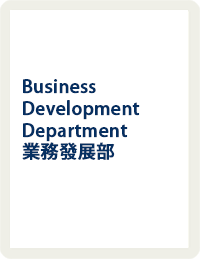
<style>
.page{position:relative;width:200px;height:259px;background:#ffffff}
.page>*{position:absolute;margin:0}
.t1{font:18px "KozGoPr6N-Medium";letter-spacing:0.005em;color:#052f61;font-weight:bold}
</style>
<div class="page">
<p class="t1" style="left:22px;top:79px;width:118px;height:81px">Business Development Department<br>業務發展部</p>
</div>
